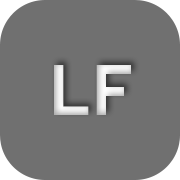
<style>
.page{position:relative;width:180px;height:180px;background:#707070}
.page>*{position:absolute;margin:0}
.t1{font:72px "CascadiaMonoRoman-Bold";color:#e9e9e9}
</style>
<div class="page">
<p class="t1" style="left:54px;top:65px;width:77px;height:50px">LF</p>
</div>
